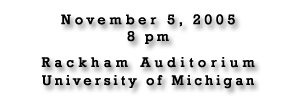
<style>
.page{position:relative;width:305px;height:105px;background:#ffffff}
.page>*{position:absolute;margin:0}
.t1{font:14px/18px "Rockwell";letter-spacing:0.205em;color:#000000;font-weight:bold}
.t2{font:14px "Rockwell";letter-spacing:0.25em;color:#000000;font-weight:bold}
.t3{font:14px "Rockwell";letter-spacing:0.2em;color:#000000;font-weight:bold}
.t4{font:14px/26px "Rockwell";letter-spacing:0.3em;color:#000000;font-weight:bold}
</style>
<div class="page">
<p class="t1" style="left:41px;top:14px;width:214px;height:75px;text-align:center"><span class="t2">November 5, 2005<br></span><span class="t3">8 pm<br></span><span class="t4">Rackham Auditorium<br></span>University of Michigan</p>
</div>
